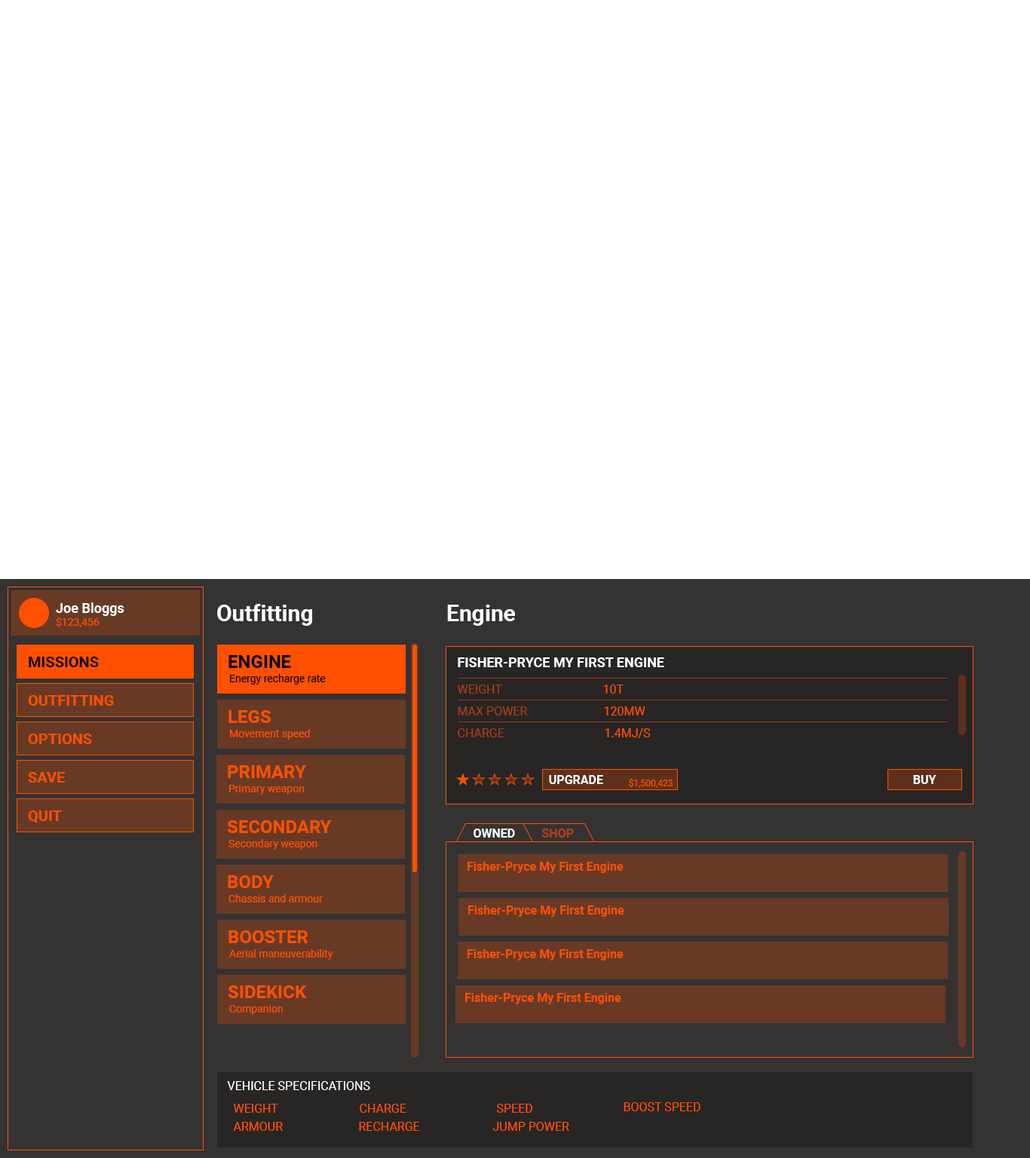
<style>
.page{position:relative;width:1030px;height:1158px;background:#ffffff}
.page>*{position:absolute;margin:0}
.t1{font:13.6px "Roboto-Bold";color:#ffffff}
.t2{font:22.6px "Roboto-Bold";color:#ffffff}
.t3{font:10.6px "Roboto-Regular";color:#ff5000}
.t4{font:15.1px "Roboto-Bold";color:#000000}
.t5{font:18.1px "Roboto-Bold";color:#000000}
.t6{font:10.6px "Roboto-Regular";color:#000000}
.t7{font:12.1px "Roboto-Regular";color:#ab3d13}
.t8{font:12.1px "Roboto-Regular";color:#ff5000}
.t9{font:15.1px "Roboto-Bold";color:#ff5000}
.t10{font:18.1px "Roboto-Bold";color:#ff5000}
.t11{font:12.1px "Roboto-Bold";color:#ffffff}
.t12{font:9px "Roboto-Regular";color:#ff5000}
.t13{font:12.1px "Roboto-Bold";color:#ae421c}
.t14{font:12.1px "Roboto-Bold";color:#ff5000}
.t15{font:12.1px "Roboto-Regular";color:#ffffff}
</style>
<div class="page">
<p class="t1" style="left:56px;top:602px;width:68px;height:14px">Joe Bloggs</p>
<p class="t2" style="left:217px;top:604px;width:95px;height:22px">Outfitting</p>
<p class="t2" style="left:447px;top:605px;width:68px;height:21px">Engine</p>
<p class="t3" style="left:56px;top:617px;width:44px;height:10px">$123,456</p>
<p class="t4" style="left:29px;top:657px;width:70px;height:10px">MISSIONS</p>
<p class="t5" style="left:228px;top:655px;width:63px;height:13px">ENGINE</p>
<p class="t1" style="left:458px;top:657px;width:206px;height:10px">FISHER-PRYCE MY FIRST ENGINE</p>
<p class="t6" style="left:230px;top:674px;width:96px;height:11px">Energy recharge rate</p>
<p class="t7" style="left:458px;top:685px;width:44px;height:9px">WEIGHT</p>
<p class="t8" style="left:603px;top:685px;width:20px;height:9px">10T</p>
<p class="t9" style="left:28px;top:695px;width:86px;height:11px">OUTFITTING</p>
<p class="t10" style="left:228px;top:710px;width:43px;height:13px">LEGS</p>
<p class="t7" style="left:458px;top:706px;width:70px;height:9px">MAX POWER</p>
<p class="t8" style="left:604px;top:706px;width:41px;height:9px">120MW</p>
<p class="t9" style="left:28px;top:734px;width:64px;height:10px">OPTIONS</p>
<p class="t3" style="left:230px;top:729px;width:80px;height:11px">Movement speed</p>
<p class="t7" style="left:458px;top:728px;width:46px;height:9px">CHARGE</p>
<p class="t8" style="left:605px;top:728px;width:45px;height:10px">1.4MJ/S</p>
<p class="t9" style="left:28px;top:772px;width:37px;height:11px">SAVE</p>
<p class="t10" style="left:228px;top:765px;width:78px;height:13px">PRIMARY</p>
<p class="t3" style="left:229px;top:785px;width:76px;height:10px">Primary weapon</p>
<p class="t11" style="left:549px;top:775px;width:54px;height:9px">UPGRADE</p>
<p class="t12" style="left:629px;top:778px;width:43px;height:10px">$1,500,423</p>
<p class="t11" style="left:913px;top:775px;width:23px;height:9px">BUY</p>
<p class="t9" style="left:28px;top:810px;width:34px;height:13px">QUIT</p>
<p class="t10" style="left:227px;top:820px;width:105px;height:13px">SECONDARY</p>
<p class="t11" style="left:473px;top:829px;width:42px;height:9px">OWNED</p>
<p class="t13" style="left:542px;top:829px;width:32px;height:9px">SHOP</p>
<p class="t3" style="left:228px;top:839px;width:89px;height:11px">Secondary weapon</p>
<p class="t14" style="left:467px;top:862px;width:156px;height:11px">Fisher-Pryce My First Engine</p>
<p class="t10" style="left:228px;top:875px;width:46px;height:13px">BODY</p>
<p class="t3" style="left:228px;top:894px;width:95px;height:8px">Chassis and armour</p>
<p class="t14" style="left:468px;top:905px;width:156px;height:12px">Fisher-Pryce My First Engine</p>
<p class="t10" style="left:228px;top:930px;width:80px;height:13px">BOOSTER</p>
<p class="t3" style="left:229px;top:949px;width:104px;height:11px">Aerial maneuverability</p>
<p class="t14" style="left:467px;top:949px;width:156px;height:11px">Fisher-Pryce My First Engine</p>
<p class="t10" style="left:228px;top:985px;width:79px;height:13px">SIDEKICK</p>
<p class="t14" style="left:465px;top:993px;width:156px;height:11px">Fisher-Pryce My First Engine</p>
<p class="t3" style="left:229px;top:1005px;width:54px;height:10px">Companion</p>
<p class="t15" style="left:227px;top:1081px;width:143px;height:9px">VEHICLE SPECIFICATIONS</p>
<p class="t8" style="left:234px;top:1104px;width:44px;height:9px">WEIGHT</p>
<p class="t8" style="left:360px;top:1104px;width:46px;height:9px">CHARGE</p>
<p class="t8" style="left:497px;top:1104px;width:35px;height:9px">SPEED</p>
<p class="t8" style="left:623px;top:1102px;width:77px;height:9px">BOOST SPEED</p>
<p class="t8" style="left:233px;top:1122px;width:50px;height:9px">ARMOUR</p>
<p class="t8" style="left:359px;top:1122px;width:61px;height:9px">RECHARGE</p>
<p class="t8" style="left:492px;top:1122px;width:77px;height:9px">JUMP POWER</p>
</div>
